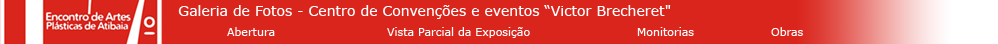
<style>
.page{position:relative;width:998px;height:44px;background:#da251c}
.page>*{position:absolute;margin:0}
.t1{font:14px "MSReferenceSansSerif";color:#ffffff}
.t2{font:11px "MSReferenceSansSerif";color:#ffffff}
</style>
<div class="page">
<p class="t1" style="left:178px;top:5px;width:493px;height:14px">Galeria de Fotos - Centro de Convenções e eventos “Victor Brecheret"</p>
<p class="t2" style="left:227px;top:27px;width:48px;height:9px">Abertura</p>
<p class="t2" style="left:387px;top:27px;width:143px;height:11px">Vista Parcial da Exposição</p>
<p class="t2" style="left:637px;top:27px;width:57px;height:9px">Monitorias</p>
<p class="t2" style="left:771px;top:27px;width:32px;height:9px">Obras</p>
</div>
